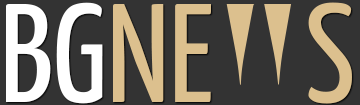
<style>
.page{position:relative;width:360px;height:105px;background:#333333}
.page>*{position:absolute;margin:0}
.t1{font:140px "YanoneKaffeesatz-Regular";color:#ffffff}
.t2{font:140px "YanoneKaffeesatz-Regular";color:#dcc08e}
</style>
<div class="page">
<p class="t1" style="left:6px;top:2px;width:205px;height:102px">BG<span class="t2">NE</span></p>
<p class="t2" style="left:308px;top:2px;width:44px;height:102px">S</p>
</div>
